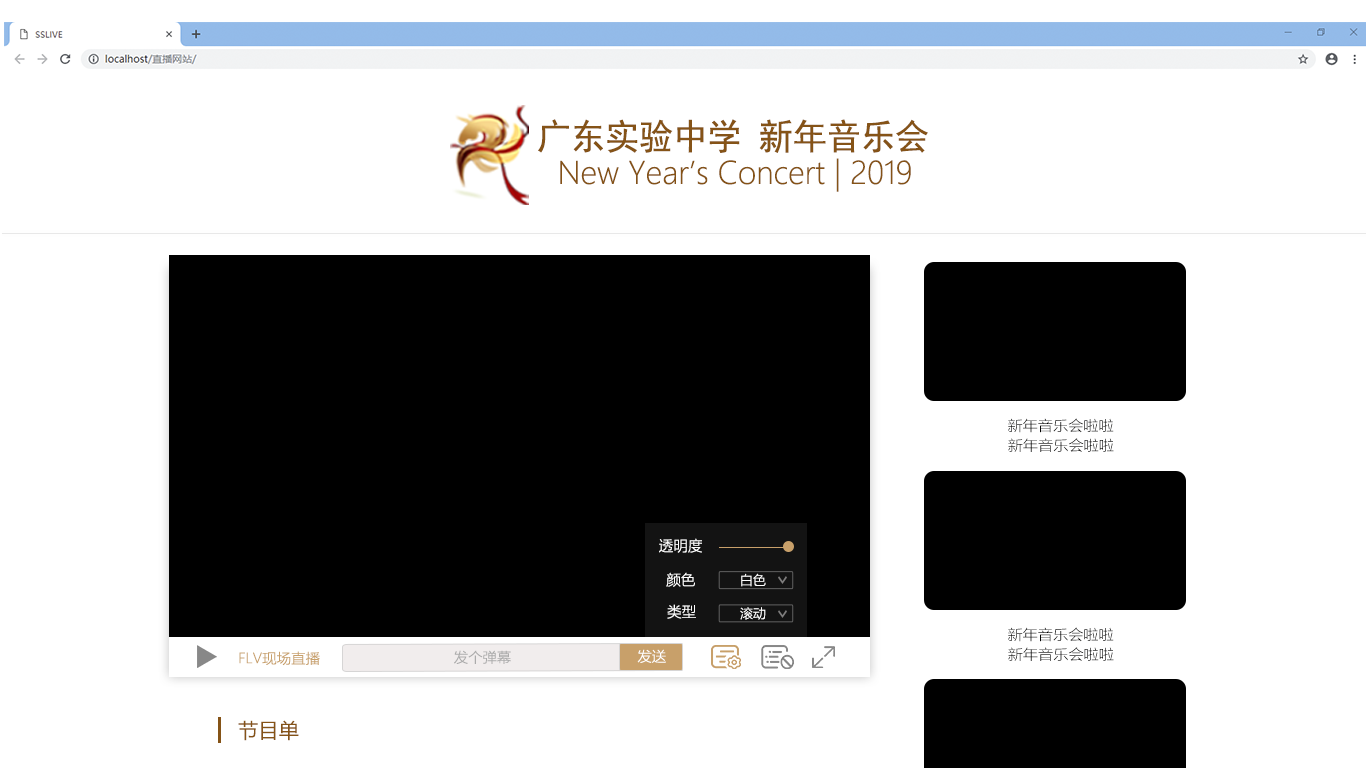
<style>
.page{position:relative;width:1366px;height:768px;background:#ffffff}
.page>*{position:absolute;margin:0}
.t1{font:35.7px "SimHei";color:#855317;scale:0.96 1}
.t2{font:30.7px "MicrosoftYaHeiUILight";color:#855317}
.t3{font:14.3px/71.4px "MicrosoftYaHeiLight";color:#010100;scale:1.06 1}
.t4{font:14.3px "MicrosoftYaHeiLight";scale:1.06 1}
.t5{font:14.6px "MicrosoftYaHeiLight";color:#ffffff}
.t6{font:13px "MicrosoftYaHeiLight";color:#ffffff}
.t7{font:14px "MicrosoftYaHeiLight";color:#c8a06a;scale:1.04 1}
.t8{font:14px "MicrosoftYaHeiLight";color:#ababab}
.t9{font:14px "MicrosoftYaHeiLight";color:#ffffff}
.t10{font:20.3px "MicrosoftYaHei";color:#855317}
</style>
<div class="page">
<p class="t1" style="left:538px;top:119px;width:390px;height:34px">广东实验中学 新年音乐会</p>
<p class="t2" style="left:560px;top:158px;width:351px;height:34px">New Year’s Concert | 2019</p>
<p class="t3" style="left:1008px;top:418px;width:106px;height:15px;text-align:center">新年音乐会啦啦<br><br><br><br><br><br><br><br><br><br><br><br><br><br><br><br><br><br><br><br><br><br>新年新年音乐盒</p>
<p class="t4" style="left:1008px;top:438px;width:106px;height:14px">新年音乐会啦啦</p>
<p class="t5" style="left:659px;top:538px;width:43px;height:15px">透明度</p>
<p class="t5" style="left:666px;top:572px;width:29px;height:15px">颜色</p>
<p class="t6" style="left:741px;top:573px;width:25px;height:14px">白色</p>
<p class="t5" style="left:667px;top:604px;width:29px;height:15px">类型</p>
<p class="t6" style="left:740px;top:607px;width:26px;height:13px">滚动</p>
<p class="t3" style="left:1008px;top:627px;width:106px;height:15px;text-align:center">新年音乐会啦啦<br><br><br><br><br><br><br><br><br><br><br><br><br><br><br><br><br><br><br><br><br><br>新年新年音乐盒</p>
<p class="t7" style="left:239px;top:651px;width:81px;height:15px">FLV现场直播</p>
<p class="t8" style="left:454px;top:650px;width:57px;height:14px">发个弹幕</p>
<p class="t9" style="left:637px;top:649px;width:29px;height:14px">发送</p>
<p class="t4" style="left:1008px;top:647px;width:106px;height:14px">新年音乐会啦啦</p>
<p class="t10" style="left:238px;top:720px;width:61px;height:21px">节目单</p>
</div>
